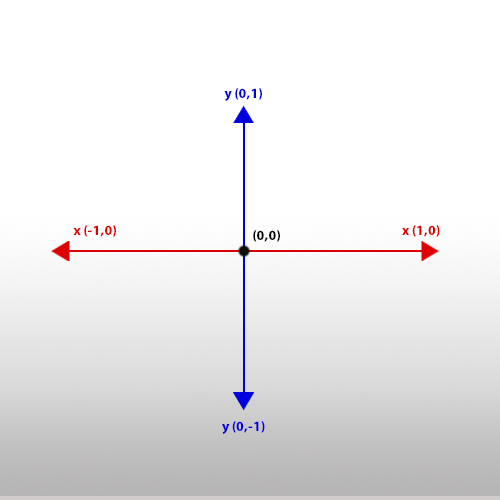
<style>
.page{position:relative;width:500px;height:500px;background:#ffffff}
.page>*{position:absolute;margin:0}
.t1{font:14px "MyriadPro-Bold";color:#0000dc}
.t2{font:14px "MyriadPro-Bold";color:#dc0000}
.t3{font:14px "MyriadPro-Bold";color:#000000}
</style>
<div class="page">
<p class="t1" style="left:224px;top:88px;width:38px;height:13px">y (0,1)</p>
<p class="t2" style="left:73px;top:225px;width:43px;height:12px">x (-1,0)</p>
<p class="t3" style="left:253px;top:230px;width:27px;height:12px">(0,0)</p>
<p class="t2" style="left:402px;top:225px;width:38px;height:12px">x (1,0)</p>
<p class="t1" style="left:222px;top:421px;width:43px;height:13px">y (0,-1)</p>
</div>
